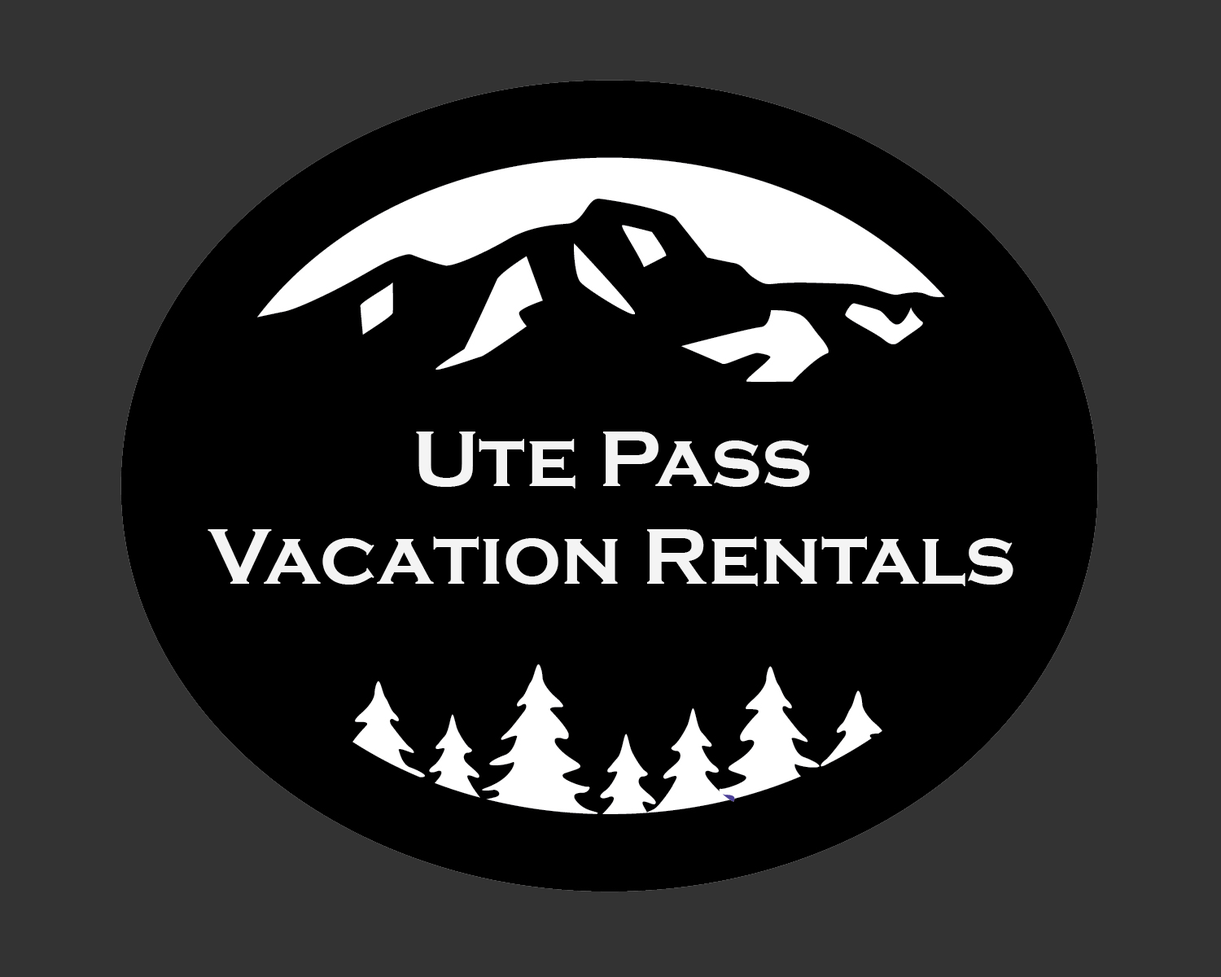
<style>
.page{position:relative;width:1221px;height:977px;background:#333333}
.page>*{position:absolute;margin:0}
.t1{font:81.4px "CopperplateGothic-Bold";color:#f4f4f4}
</style>
<div class="page">
<p class="t1" style="left:208px;top:431px;width:805px;height:155px;text-align:center">Ute Pass<br>Vacation Rentals</p>
</div>
